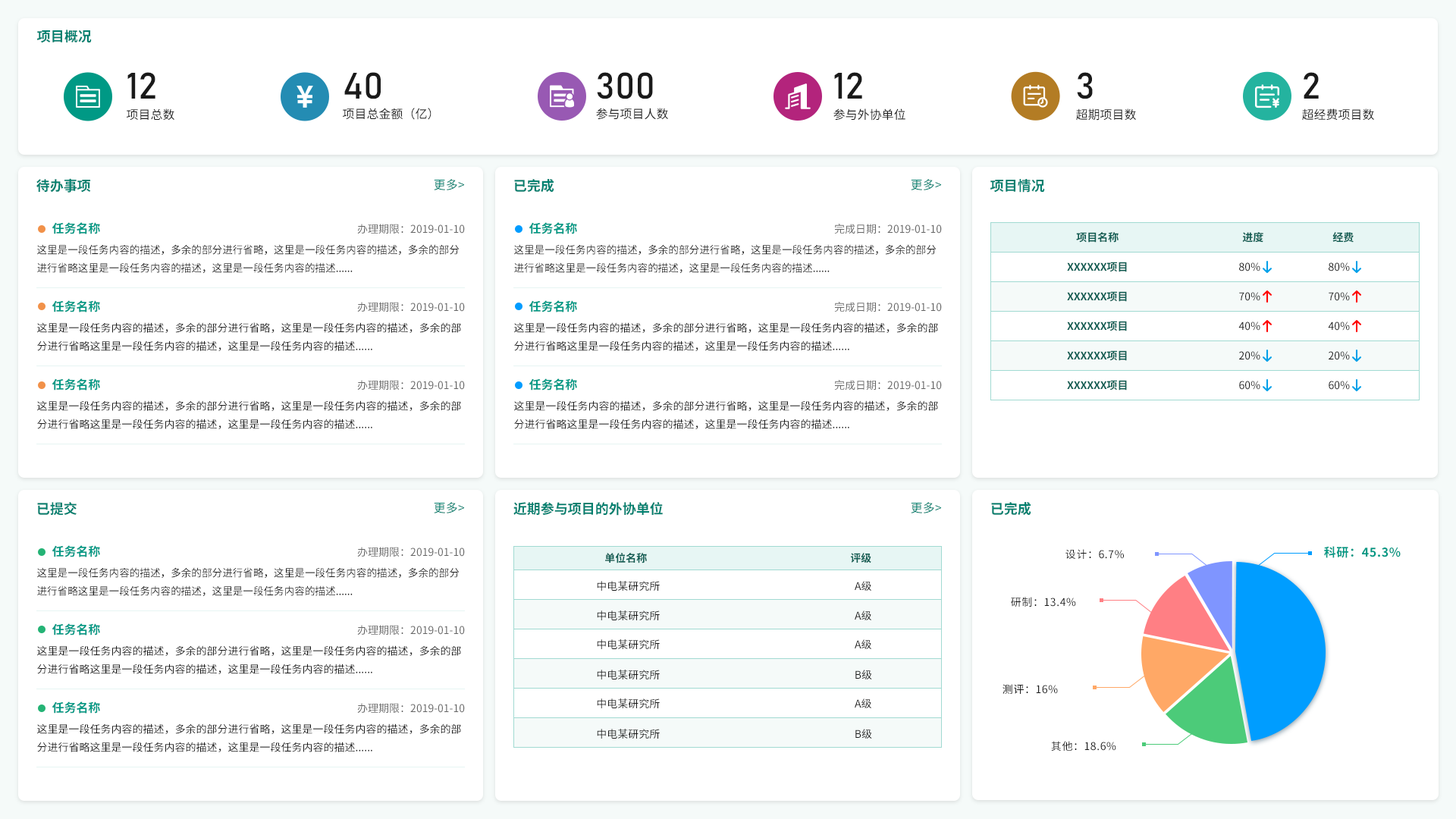
<style>
.page{position:relative;width:1456px;height:819px;background:#ffffff}
.page>*{position:absolute;margin:0}
.t1{font:13.6px "NotoSansHans-Bold";color:#00806f}
.t2{font:36.4px "Bahnschrift";color:#1a1a1a}
.t3{font:12.1px "NotoSansHans-Regular";color:#1a1a1a}
.t4{font:12.1px "NotoSansHans-Regular";color:#00806f}
.t5{font:12.1px "NotoSansHans-Bold";color:#009985}
.t6{font:10.6px "NotoSansHans-Regular";color:#666666}
.t7{font:10.6px "NotoSansHans-Bold";color:#0f5d53}
.t8{font:10.6px/18.2px "NotoSansHans-Regular";color:#1a1a1a}
.t9{font:10.6px "NotoSansHans-Regular";color:#1a1a1a}
.t10{font:12.1px "NotoSansHans-Bold";letter-spacing:0.04em;color:#009985}
.t11{font:10.6px "NotoSansHans-Regular";letter-spacing:0.04em;color:#1a1a1a}
</style>
<div class="page">
<p class="t1" style="left:37px;top:30px;width:55px;height:13px">项目概况</p>
<p class="t2" style="left:127px;top:72px;width:28px;height:27px">12</p>
<p class="t2" style="left:344px;top:72px;width:37px;height:27px">40</p>
<p class="t2" style="left:597px;top:72px;width:56px;height:27px">300</p>
<p class="t2" style="left:834px;top:72px;width:28px;height:27px">12</p>
<p class="t2" style="left:1077px;top:72px;width:16px;height:27px">3</p>
<p class="t2" style="left:1304px;top:72px;width:15px;height:27px">2</p>
<p class="t3" style="left:127px;top:108px;width:47px;height:13px">项目总数</p>
<p class="t3" style="left:343px;top:108px;width:88px;height:12px">项目总金额（亿）</p>
<p class="t3" style="left:596px;top:108px;width:72px;height:12px">参与项目人数</p>
<p class="t3" style="left:833px;top:108px;width:72px;height:13px">参与外协单位</p>
<p class="t3" style="left:1076px;top:108px;width:60px;height:13px">超期项目数</p>
<p class="t3" style="left:1302px;top:108px;width:72px;height:13px">超经费项目数</p>
<p class="t1" style="left:36px;top:178px;width:55px;height:15px">待办事项</p>
<p class="t4" style="left:434px;top:179px;width:30px;height:11px">更多&gt;</p>
<p class="t1" style="left:514px;top:179px;width:40px;height:14px">已完成</p>
<p class="t4" style="left:911px;top:179px;width:30px;height:11px">更多&gt;</p>
<p class="t1" style="left:990px;top:179px;width:55px;height:14px">项目情况</p>
<p class="t5" style="left:52px;top:222px;width:48px;height:12px">任务名称</p>
<p class="t6" style="left:357px;top:224px;width:108px;height:10px">办理期限：2019-01-10</p>
<p class="t5" style="left:529px;top:222px;width:48px;height:12px">任务名称</p>
<p class="t6" style="left:834px;top:224px;width:108px;height:10px">完成日期：2019-01-10</p>
<p class="t7" style="left:1076px;top:232px;width:43px;height:11px">项目名称</p>
<p class="t7" style="left:1242px;top:232px;width:21px;height:11px">进度</p>
<p class="t7" style="left:1332px;top:232px;width:22px;height:11px">经费</p>
<p class="t8" style="left:37px;top:244px;width:423px;height:29px">这里是一段任务内容的描述，多余的部分进行省略，这里是一段任务内容的描述，多余的部分进行省略这里是一段任务内容的描述，这里是一段任务内容的描述......</p>
<p class="t8" style="left:514px;top:244px;width:423px;height:29px">这里是一段任务内容的描述，多余的部分进行省略，这里是一段任务内容的描述，多余的部分进行省略这里是一段任务内容的描述，这里是一段任务内容的描述......</p>
<p class="t7" style="left:1067px;top:262px;width:60px;height:10px">XXXXXX项目</p>
<p class="t9" style="left:1239px;top:262px;width:21px;height:9px">80%</p>
<p class="t9" style="left:1329px;top:262px;width:21px;height:9px">80%</p>
<p class="t7" style="left:1067px;top:291px;width:60px;height:11px">XXXXXX项目</p>
<p class="t9" style="left:1239px;top:292px;width:21px;height:9px">70%</p>
<p class="t9" style="left:1329px;top:292px;width:21px;height:9px">70%</p>
<p class="t5" style="left:52px;top:300px;width:48px;height:12px">任务名称</p>
<p class="t6" style="left:357px;top:302px;width:108px;height:10px">办理期限：2019-01-10</p>
<p class="t5" style="left:529px;top:300px;width:48px;height:12px">任务名称</p>
<p class="t6" style="left:834px;top:302px;width:108px;height:10px">完成日期：2019-01-10</p>
<p class="t8" style="left:37px;top:322px;width:424px;height:29px">这里是一段任务内容的描述，多余的部分进行省略，这里是一段任务内容的描述，多余的部分进行省略这里是一段任务内容的描述，这里是一段任务内容的描述......</p>
<p class="t8" style="left:514px;top:322px;width:424px;height:29px">这里是一段任务内容的描述，多余的部分进行省略，这里是一段任务内容的描述，多余的部分进行省略这里是一段任务内容的描述，这里是一段任务内容的描述......</p>
<p class="t7" style="left:1067px;top:321px;width:60px;height:10px">XXXXXX项目</p>
<p class="t9" style="left:1238px;top:322px;width:22px;height:9px">40%</p>
<p class="t9" style="left:1328px;top:322px;width:22px;height:9px">40%</p>
<p class="t7" style="left:1067px;top:350px;width:60px;height:11px">XXXXXX项目</p>
<p class="t9" style="left:1239px;top:351px;width:21px;height:9px">20%</p>
<p class="t9" style="left:1329px;top:351px;width:21px;height:9px">20%</p>
<p class="t5" style="left:52px;top:378px;width:48px;height:13px">任务名称</p>
<p class="t6" style="left:357px;top:380px;width:108px;height:10px">办理期限：2019-01-10</p>
<p class="t5" style="left:529px;top:378px;width:48px;height:13px">任务名称</p>
<p class="t6" style="left:834px;top:380px;width:108px;height:11px">完成日期：2019-01-10</p>
<p class="t7" style="left:1067px;top:380px;width:60px;height:11px">XXXXXX项目</p>
<p class="t9" style="left:1239px;top:381px;width:21px;height:9px">60%</p>
<p class="t9" style="left:1329px;top:381px;width:21px;height:9px">60%</p>
<p class="t8" style="left:37px;top:400px;width:424px;height:29px">这里是一段任务内容的描述，多余的部分进行省略，这里是一段任务内容的描述，多余的部分进行省略这里是一段任务内容的描述，这里是一段任务内容的描述......</p>
<p class="t8" style="left:514px;top:400px;width:424px;height:29px">这里是一段任务内容的描述，多余的部分进行省略，这里是一段任务内容的描述，多余的部分进行省略这里是一段任务内容的描述，这里是一段任务内容的描述......</p>
<p class="t1" style="left:37px;top:502px;width:40px;height:14px">已提交</p>
<p class="t4" style="left:434px;top:502px;width:30px;height:11px">更多&gt;</p>
<p class="t1" style="left:513px;top:502px;width:150px;height:14px">近期参与项目的外协单位</p>
<p class="t4" style="left:911px;top:502px;width:30px;height:11px">更多&gt;</p>
<p class="t1" style="left:991px;top:502px;width:40px;height:14px">已完成</p>
<p class="t5" style="left:52px;top:545px;width:48px;height:12px">任务名称</p>
<p class="t10" style="left:1324px;top:546px;width:77px;height:12px">科研：45.3%</p>
<p class="t6" style="left:357px;top:547px;width:108px;height:10px">办理期限：2019-01-10</p>
<p class="t7" style="left:605px;top:553px;width:42px;height:10px">单位名称</p>
<p class="t7" style="left:851px;top:553px;width:20px;height:10px">评级</p>
<p class="t11" style="left:1065px;top:549px;width:59px;height:10px">设计：6.7%</p>
<p class="t8" style="left:37px;top:567px;width:423px;height:29px">这里是一段任务内容的描述，多余的部分进行省略，这里是一段任务内容的描述，多余的部分进行省略这里是一段任务内容的描述，这里是一段任务内容的描述......</p>
<p class="t9" style="left:597px;top:581px;width:63px;height:10px">中电某研究所</p>
<p class="t9" style="left:855px;top:581px;width:16px;height:10px">A级</p>
<p class="t11" style="left:1011px;top:597px;width:65px;height:10px">研制：13.4%</p>
<p class="t9" style="left:597px;top:610px;width:63px;height:10px">中电某研究所</p>
<p class="t9" style="left:855px;top:610px;width:16px;height:10px">A级</p>
<p class="t5" style="left:52px;top:623px;width:48px;height:12px">任务名称</p>
<p class="t6" style="left:357px;top:625px;width:108px;height:10px">办理期限：2019-01-10</p>
<p class="t9" style="left:597px;top:639px;width:63px;height:10px">中电某研究所</p>
<p class="t9" style="left:855px;top:639px;width:16px;height:10px">A级</p>
<p class="t8" style="left:37px;top:645px;width:424px;height:29px">这里是一段任务内容的描述，多余的部分进行省略，这里是一段任务内容的描述，多余的部分进行省略这里是一段任务内容的描述，这里是一段任务内容的描述......</p>
<p class="t9" style="left:597px;top:670px;width:63px;height:9px">中电某研究所</p>
<p class="t9" style="left:855px;top:670px;width:17px;height:9px">B级</p>
<p class="t11" style="left:1003px;top:684px;width:55px;height:10px">测评：16%</p>
<p class="t5" style="left:52px;top:701px;width:48px;height:13px">任务名称</p>
<p class="t9" style="left:597px;top:698px;width:63px;height:10px">中电某研究所</p>
<p class="t9" style="left:855px;top:698px;width:16px;height:10px">A级</p>
<p class="t6" style="left:357px;top:703px;width:108px;height:10px">办理期限：2019-01-10</p>
<p class="t8" style="left:37px;top:723px;width:424px;height:29px">这里是一段任务内容的描述，多余的部分进行省略，这里是一段任务内容的描述，多余的部分进行省略这里是一段任务内容的描述，这里是一段任务内容的描述......</p>
<p class="t9" style="left:597px;top:729px;width:63px;height:10px">中电某研究所</p>
<p class="t9" style="left:855px;top:729px;width:17px;height:10px">B级</p>
<p class="t11" style="left:1051px;top:741px;width:65px;height:10px">其他：18.6%</p>
</div>
